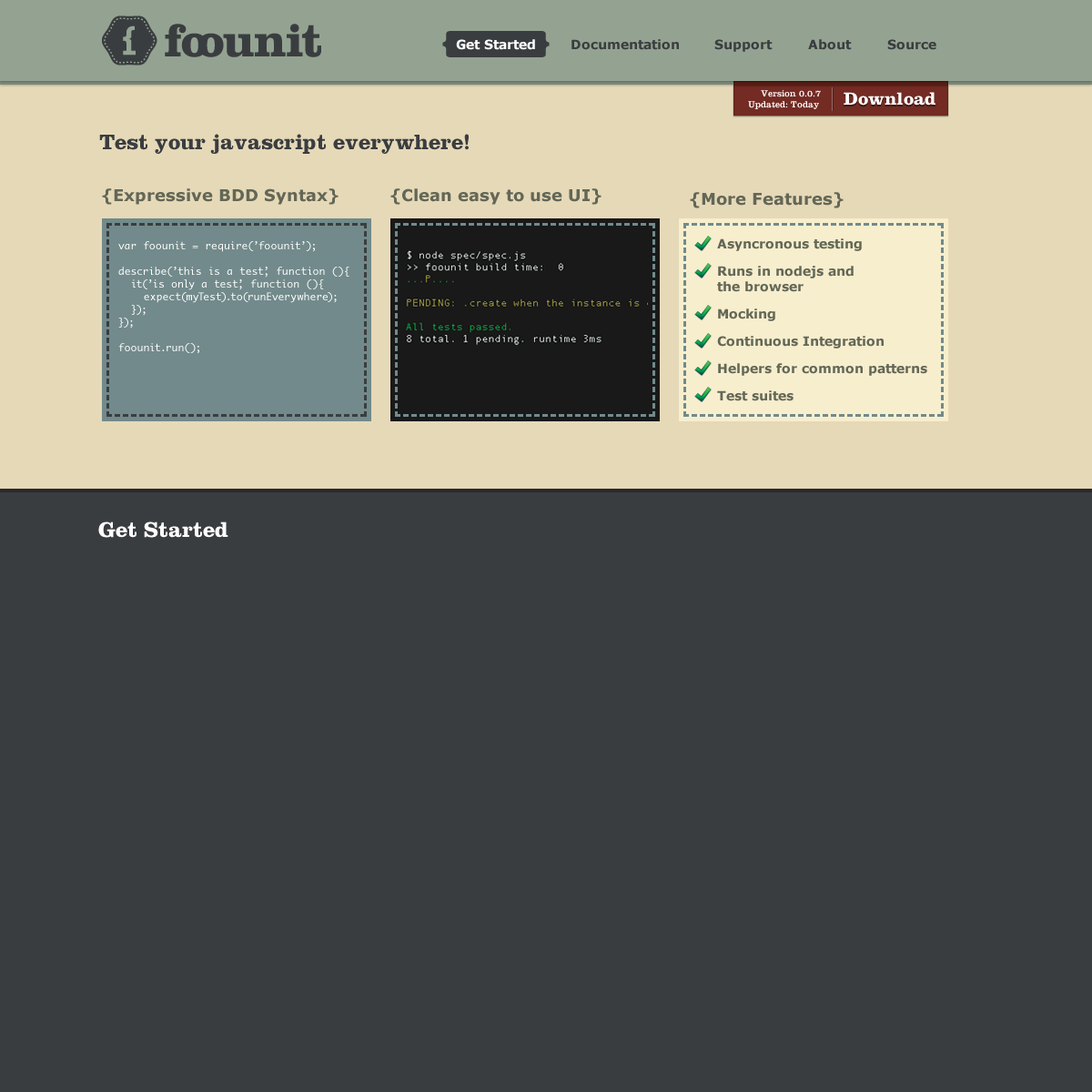
<style>
.page{position:relative;width:1092px;height:1092px;background:#3a3d40}
.page>*{position:absolute;margin:0}
.t1{font:12.7px "Verdana-Bold";color:#ffffff}
.t2{font:12.7px "Verdana-Bold";color:#3a3d40}
.t3{font:9.1px "ClarendonLTStd";color:#ffffff}
.t4{font:18.2px "ClarendonLTStd-Bold"}
.t5{font:18.2px "ClarendonLTStd-Bold";color:#ffffff}
.t6{font:21.8px "ClarendonLTStd-Bold";color:#3a3d40}
.t7{font:16.4px "Verdana-Bold";color:#636756}
.t8{font:10px/12.7px "Monaco";color:#ffffff}
.t9{font:12.7px/27.3px "Verdana-Bold";color:#636756}
.t10{font:12.7px/15.5px "Verdana-Bold";color:#636756}
.t11{font:21.8px "ClarendonLTStd-Bold";color:#ffffff}
</style>
<div class="page">
<p class="t1" style="left:456px;top:39px;width:79px;height:11px">Get Started</p>
<p class="t2" style="left:571px;top:39px;width:108px;height:11px">Documentation</p>
<p class="t2" style="left:714px;top:39px;width:59px;height:13px">Support</p>
<p class="t2" style="left:808px;top:39px;width:44px;height:11px">About</p>
<p class="t2" style="left:887px;top:39px;width:49px;height:11px">Source</p>
<p class="t3" style="left:748px;top:101px;width:71px;height:8px">Updated: Today</p>
<p class="t3" style="left:761px;top:90px;width:60px;height:7px">Version 0.0.7</p>
<p class="t4" style="left:844px;top:94px;width:91px;height:13px">Download</p>
<p class="t5" style="left:844px;top:92px;width:91px;height:14px">Download</p>
<p class="t6" style="left:99px;top:134px;width:370px;height:20px">Test your javascript everywhere!</p>
<p class="t7" style="left:102px;top:188px;width:237px;height:17px">{Expressive BDD Syntax}</p>
<p class="t7" style="left:390px;top:188px;width:212px;height:17px">{Clean easy to use UI}</p>
<p class="t7" style="left:690px;top:192px;width:154px;height:16px">{More Features}</p>
<p class="t8" style="left:118px;top:241px;width:231px;height:113px">var foounit = require(’foounit’);<br><br>describe(’this is a test’, function (){<br>  it(’is only a test’, function (){<br>    expect(myTest).to(runEverywhere);<br>  });<br>});<br><br>foounit.run();</p>
<p class="t9" style="left:717px;top:238px;width:210px;height:163px">Asyncronous testing<br>Runs in nodejs and <br><span class="t10">the browser<br></span>Mocking<br>Continuous Integration<br>Helpers for common patterns<br>Test suites</p>
<p class="t11" style="left:98px;top:521px;width:130px;height:17px">Get Started</p>
</div>
